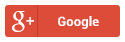
<style>
.page{position:relative;width:125px;height:42px;background:#dd4b39}
.page>*{position:absolute;margin:0}
.t1{font:13px "Roboto-Bold";letter-spacing:0.01em;color:#ffffff}
.t2{font:13px "Roboto-Bold";letter-spacing:0.05em;color:#ffffff}
</style>
<div class="page">
<p class="t1" style="left:58px;top:16px;width:41px;height:13px">Googl<span class="t2">e</span></p>
</div>
